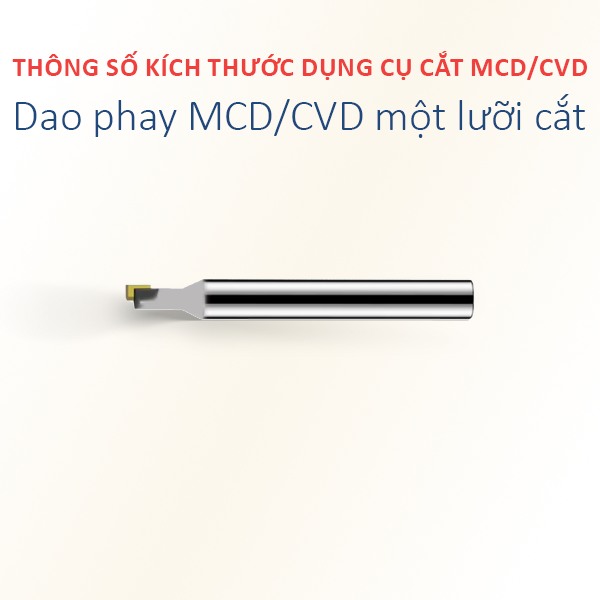
<style>
.page{position:relative;width:600px;height:600px}
.page>*{position:absolute;margin:0}
.t1{font:26.7px "Calibri-Bold";color:#ef403d;text-transform:uppercase}
.t2{font:43.9px "Calibri-Light";color:#1f497c}
</style>
<div class="page">
<p class="t1" style="left:12px;top:51px;width:575px;height:29px">Thông số kích thước dụng cụ cắt MCD/CVD</p>
<p class="t2" style="left:16px;top:94px;width:569px;height:44px">Dao phay MCD/CVD một lưỡi cắt</p>
</div>
